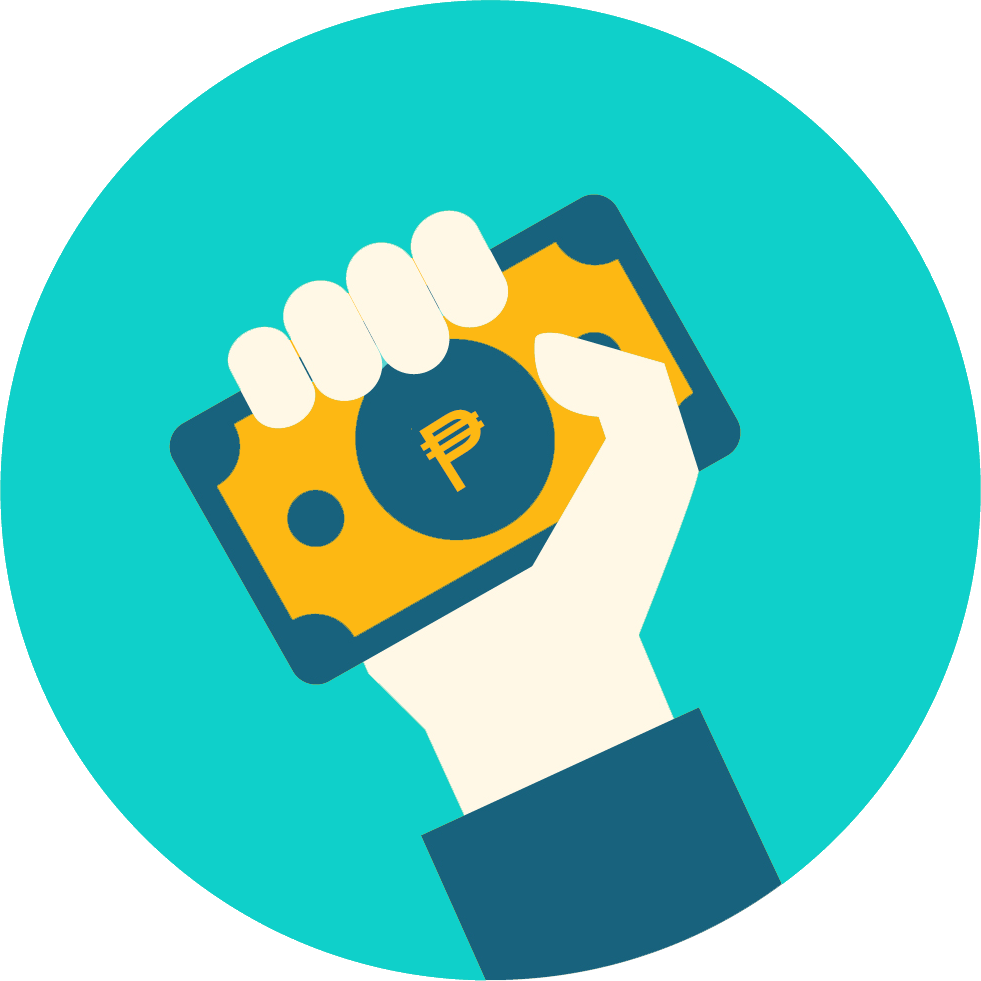
<style>
.page{position:relative;width:981px;height:981px;background:#0fd0ca}
.page>*{position:absolute;margin:0}
.t1{font:100px "ArialMT";color:#fdb813}
</style>
<div class="page">
<p class="t1" style="left:419px;top:409px;width:66px;height:83px;rotate:-32deg">₱</p>
</div>
